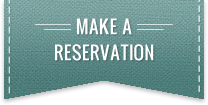
<style>
.page{position:relative;width:208px;height:105px}
.page>*{position:absolute;margin:0}
.t1{font:18px/26px "Oswald";color:#ffffff;text-transform:uppercase}
</style>
<div class="page">
<p class="t1" style="left:55px;top:18px;width:99px;height:43px;text-align:center">Make A<br>Reservation</p>
</div>
